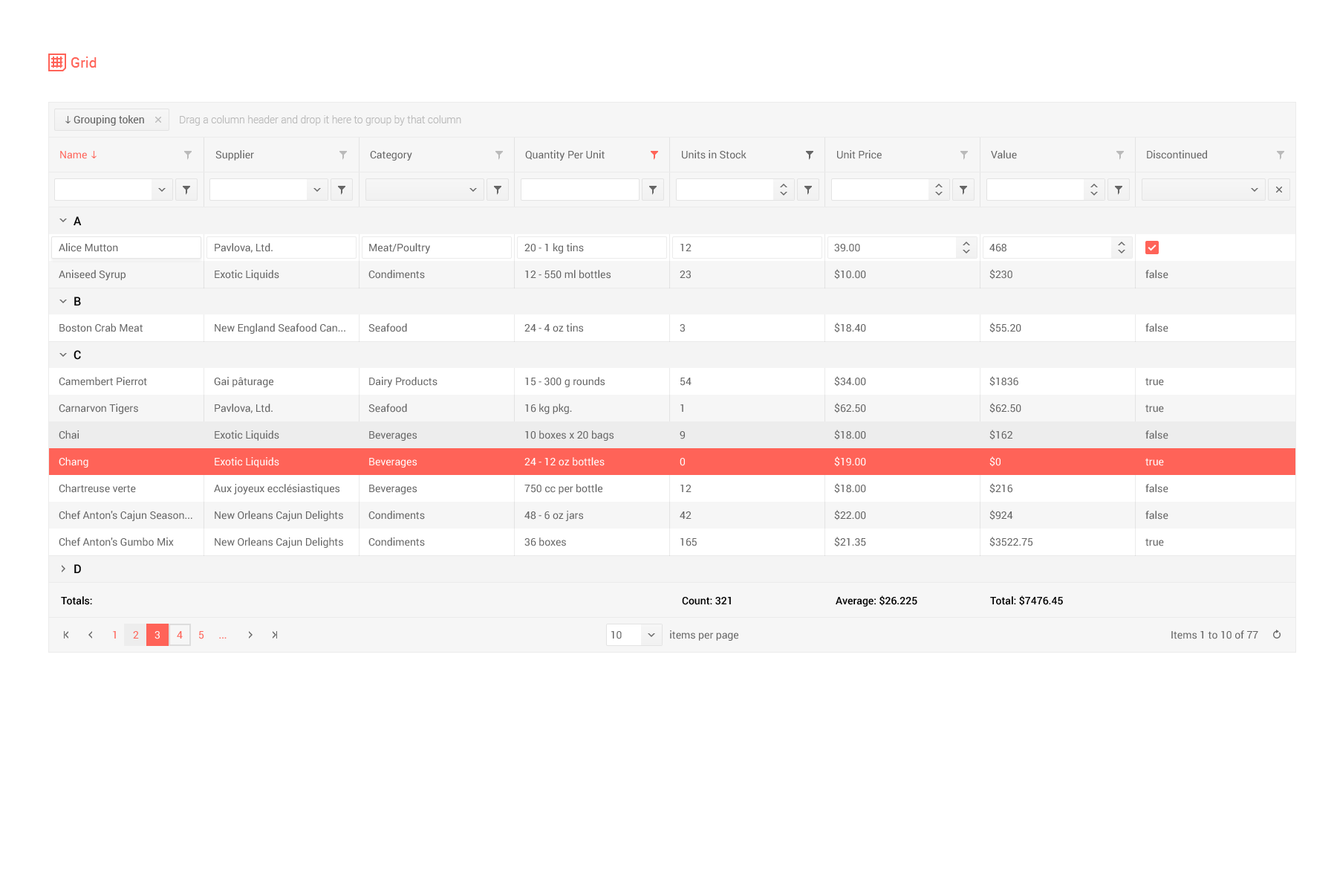
<style>
.page{position:relative;width:1337px;height:892px;background:#ffffff}
.page>*{position:absolute;margin:0}
.t1{font:14.1px "Roboto-Regular";letter-spacing:0.01em;color:#ff6358}
.t2{font:10.4px "Roboto-Regular";color:#656565}
.t3{font:10.4px "Roboto-Light";color:#bababa}
.t4{font:10.4px "Roboto-Regular";color:#ff6358}
.t5{font:11.9px/26.7px "Roboto-Medium";color:#000000}
.t6{font:10.4px/26.7px "Roboto-Regular";color:#656565}
.t7{font:10.4px/26.7px "Roboto-Regular";color:#ffffff}
.t8{font:10.4px "Roboto-Medium";color:#000000}
.t9{font:10.4px "Roboto-Regular";color:#ffffff}
</style>
<div class="page">
<p class="t1" style="left:71px;top:56px;width:26px;height:12px">Grid</p>
<p class="t2" style="left:74px;top:115px;width:70px;height:11px">Grouping token</p>
<p class="t3" style="left:180px;top:115px;width:281px;height:11px">Drag a column header and drop it here to group by that column</p>
<p class="t4" style="left:60px;top:151px;width:27px;height:8px">Name</p>
<p class="t2" style="left:215px;top:150px;width:39px;height:10px">Supplier</p>
<p class="t2" style="left:370px;top:151px;width:42px;height:9px">Category</p>
<p class="t2" style="left:525px;top:150px;width:80px;height:10px">Quantity Per Unit</p>
<p class="t2" style="left:682px;top:150px;width:65px;height:9px">Units in Stock</p>
<p class="t2" style="left:837px;top:150px;width:45px;height:9px">Unit Price</p>
<p class="t2" style="left:991px;top:150px;width:26px;height:9px">Value</p>
<p class="t2" style="left:1147px;top:150px;width:60px;height:9px">Discontinued</p>
<p class="t5" style="left:74px;top:216px;width:8px;height:357px">A<br><br><br>B<br><br>C<br><br><br><br><br><br><br><br>D</p>
<p class="t6" style="left:59px;top:243px;width:133px;height:303px">Alice Mutton<br>Aniseed Syrup<br><br>Boston Crab Meat<br><br>Camembert Pierrot<br>Carnarvon Tigers<br>Chai<br><span class="t7">Chang<br></span>Chartreuse verte<br>Chef Anton's Cajun Season...<br>Chef Anton's Gumbo Mix</p>
<p class="t6" style="left:214px;top:243px;width:131px;height:305px">Pavlova, Ltd.<br>Exotic Liquids<br><br>New England Seafood Can...<br><br>Gai pâturage<br>Pavlova, Ltd.<br>Exotic Liquids<br><span class="t7">Exotic Liquids<br></span>Aux joyeux ecclésiastiques<br>New Orleans Cajun Delights<br>New Orleans Cajun Delights</p>
<p class="t6" style="left:369px;top:243px;width:69px;height:303px">Meat/Poultry<br>Condiments<br><br>Seafood<br><br>Dairy Products<br>Seafood<br>Beverages<br><span class="t7">Beverages<br></span>Beverages<br>Condiments<br>Condiments</p>
<p class="t6" style="left:525px;top:243px;width:89px;height:303px">20 - 1 kg tins<br>12 - 550 ml bottles<br><br>24 - 4 oz tins<br><br>15 - 300 g rounds<br>16 kg pkg.<br>10 boxes x 20 bags<br><span class="t7">24 - 12 oz bottles<br></span>750 cc per bottle<br>48 - 6 oz jars<br>36 boxes</p>
<p class="t6" style="left:680px;top:244px;width:17px;height:302px">12<br>23<br><br>3<br><br>54<br>1<br>9<br><span class="t7">0<br></span>12<br>42<br>165</p>
<p class="t6" style="left:834px;top:244px;width:32px;height:303px">39.00<br>$10.00<br><br>$18.40<br><br>$34.00<br>$62.50<br>$18.00<br><span class="t7">$19.00<br></span>$18.00<br>$22.00<br>$21.35</p>
<p class="t6" style="left:990px;top:244px;width:44px;height:303px">468<br>$230<br><br>$55.20<br><br>$1836<br>$62.50<br>$162<br><span class="t7">$0<br></span>$216<br>$924<br>$3522.75</p>
<p class="t6" style="left:1146px;top:270px;width:23px;height:276px">false<br><br>false<br><br>true<br>true<br>false<br><span class="t7">true<br></span>false<br>false<br>true</p>
<p class="t8" style="left:61px;top:596px;width:31px;height:9px">Totals:</p>
<p class="t8" style="left:682px;top:597px;width:49px;height:8px">Count: 321</p>
<p class="t8" style="left:836px;top:595px;width:82px;height:11px">Average: $26.225</p>
<p class="t8" style="left:990px;top:595px;width:73px;height:11px">Total: $7476.45</p>
<p class="t4" style="left:113px;top:631px;width:3px;height:7px">1</p>
<p class="t4" style="left:133px;top:631px;width:6px;height:7px">2</p>
<p class="t9" style="left:155px;top:631px;width:5px;height:8px">3</p>
<p class="t4" style="left:177px;top:631px;width:6px;height:7px">4</p>
<p class="t4" style="left:199px;top:631px;width:5px;height:8px">5</p>
<p class="t4" style="left:219px;top:637px;width:8px;height:1px">...</p>
<p class="t2" style="left:611px;top:631px;width:11px;height:8px">10</p>
<p class="t2" style="left:670px;top:630px;width:69px;height:10px">items per page</p>
<p class="t2" style="left:1172px;top:630px;width:87px;height:9px">Items 1 to 10 of 77</p>
</div>
